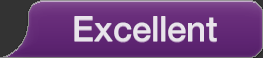
<style>
.page{position:relative;width:263px;height:58px}
.page>*{position:absolute;margin:0}
.t1{font:35px "HelveticaNeue-Medium";color:#e8e4eb}
.t2{font:10px "HelveticaNeue-Medium";color:#e8e4eb}
</style>
<div class="page">
<p class="t1" style="left:74px;top:16px;width:143px;height:26px"><span class="t2"><br></span>Excellent</p>
</div>
